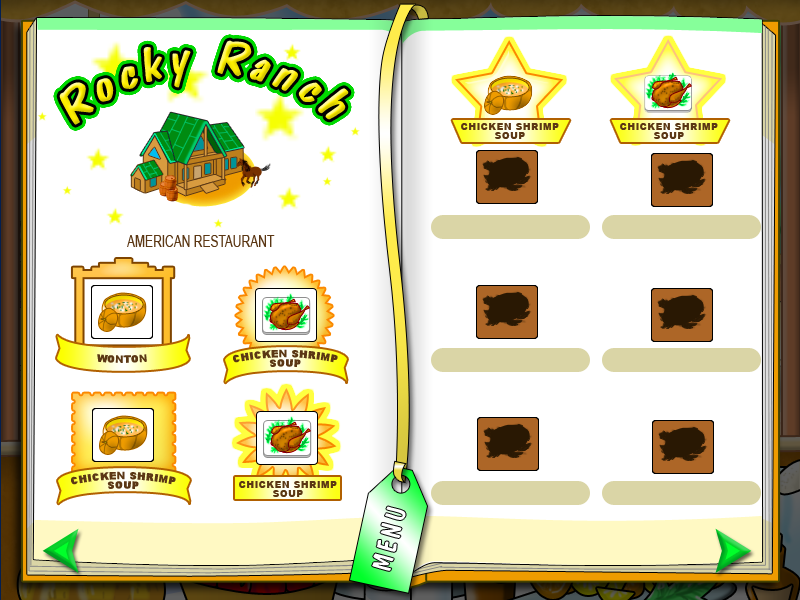
<style>
.page{position:relative;width:800px;height:600px;background:#ffffff}
.page>*{position:absolute;margin:0}
.t1{font:48.9px "DomCasualBT-Regular";letter-spacing:0.095em;font-style:italic}
.t2{font:9.4px/9.4px "Arial-Black";letter-spacing:0.045em;color:#5b3714;text-transform:uppercase}
.t3{font:15.6px "ArialMT";letter-spacing:-0.015em;color:#5b3714;text-transform:uppercase;scale:0.79 1}
.t4{font:9.4px "Arial-Black";letter-spacing:0.045em;color:#5b3714;text-transform:uppercase}
.t5{font:28.1px "DomCasualBT-Regular";letter-spacing:0.09em;color:#ffffff;font-variant:small-caps}
</style>
<div class="page">
<p class="t1" style="left:59px;top:40px;width:290px;height:85px;rotate:-1deg">Rocky Ranch</p>
<p class="t2" style="left:461px;top:123px;width:98px;height:16px;text-align:center">chicken shrimp<br>soup</p>
<p class="t2" style="left:620px;top:123px;width:98px;height:16px;text-align:center">chicken shrimp<br>soup</p>
<p class="t3" style="left:127px;top:235px;width:148px;height:12px">AMERICAN RESTAURANT</p>
<p class="t2" style="left:233px;top:349px;width:105px;height:18px;text-align:center">chicken shrimp<br>soup</p>
<p class="t4" style="left:97px;top:354px;width:50px;height:9px">wonton</p>
<p class="t2" style="left:71px;top:471px;width:105px;height:18px;text-align:center">chicken shrimp<br>soup</p>
<p class="t2" style="left:239px;top:481px;width:98px;height:16px;text-align:center">chicken shrimp<br>soup</p>
<p class="t5" style="left:372px;top:506px;width:34px;height:65px;rotate:-75deg">MENU</p>
</div>
